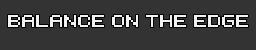
<style>
.page{position:relative;width:256px;height:50px;background:#333333}
.page>*{position:absolute;margin:0}
.t1{font:17.3px "RetroComputer";color:#f2f2f2}
</style>
<div class="page">
<p class="t1" style="left:8px;top:15px;width:240px;height:12px">BALANCE on the edge</p>
</div>
